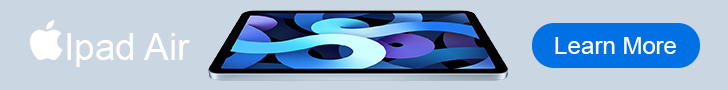
<style>
.page{position:relative;width:728px;height:90px;background:#cad6e2}
.page>*{position:absolute;margin:0}
.t1{font:37.1px "ArialMT";color:#ffffff}
.t2{font:24px "ArialMT";color:#ffffff}
</style>
<div class="page">
<p class="t1" style="left:67px;top:33px;width:123px;height:34px">Ipad Air</p>
<p class="t2" style="left:555px;top:37px;width:121px;height:17px">Learn More</p>
</div>
